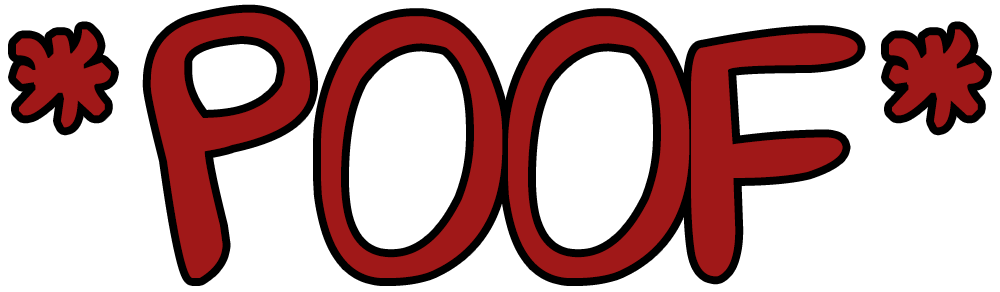
<style>
.page{position:relative;width:1000px;height:292px;background:#ffffff}
.page>*{position:absolute;margin:0}
.t1{font:318px "GoBoom!";color:#a01818}
</style>
<div class="page">
<p class="t1" style="left:16px;top:12px;width:968px;height:266px">*POOF*</p>
</div>
